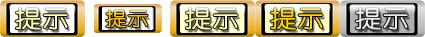
<style>
.page{position:relative;width:425px;height:37px}
.page>*{position:absolute;margin:0}
.t1{font:23.3px "YouYuan";color:#fffeb0;font-weight:bold;scale:1.14 1}
.t2{font:18.6px "YouYuan";color:#ffc600;font-weight:bold;scale:1.14 1}
.t3{font:23.3px "YouYuan";color:#ffd100;font-weight:bold;scale:1.14 1}
.t4{font:23.3px "YouYuan";color:#eaeaea;font-weight:bold;scale:1.14 1}
</style>
<div class="page">
<p class="t1" style="left:15px;top:7px;width:53px;height:23px">提示</p>
<p class="t2" style="left:105px;top:9px;width:43px;height:19px">提示</p>
<p class="t1" style="left:185px;top:7px;width:53px;height:23px">提示</p>
<p class="t3" style="left:270px;top:7px;width:53px;height:23px">提示</p>
<p class="t4" style="left:355px;top:7px;width:53px;height:23px">提示</p>
</div>
